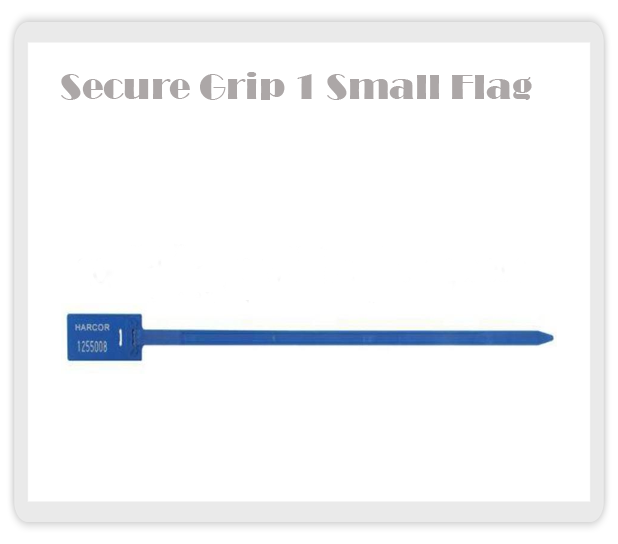
<style>
.page{position:relative;width:618px;height:544px;background:#ffffff}
.page>*{position:absolute;margin:0}
.t1{font:36px "Broadway";color:#aca7a7}
</style>
<div class="page">
<p class="t1" style="left:61px;top:72px;width:471px;height:28px">Secure Grip 1 Small Flag</p>
</div>
